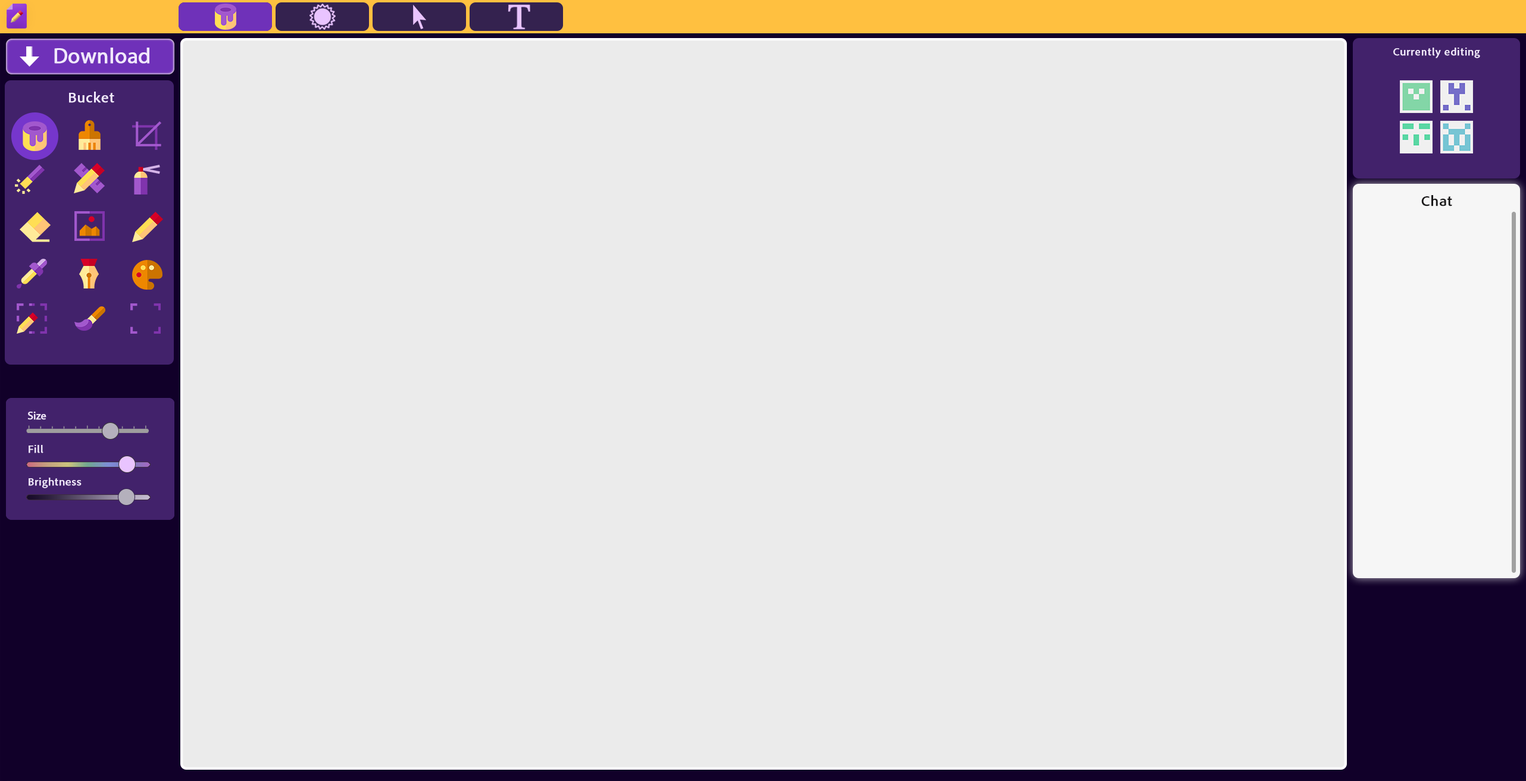
<style>
.page{position:relative;width:1526px;height:781px;background:#ebebeb}
.page>*{position:absolute;margin:0}
.t1{font:21.4px "MyriadPro-Regular";color:#f1e8fc;font-weight:bold}
.t2{font:10.7px "AdobeCleanUI-Regular";color:#f1e8fc;font-weight:bold}
.t3{font:14.3px "AdobeCleanUI-Regular";color:#f1e8fc;font-weight:bold}
.t4{font:14.3px "AdobeCleanUI-Regular";color:#191819;font-weight:bold}
.t5{font:10.7px "MyriadPro-Regular";color:#f1e8fc;font-weight:bold}
</style>
<div class="page">
<p class="t1" style="left:54px;top:48px;width:95px;height:16px">Download</p>
<p class="t2" style="left:1393px;top:48px;width:87px;height:10px">Currently editing</p>
<p class="t3" style="left:69px;top:92px;width:45px;height:11px">Bucket</p>
<p class="t4" style="left:1421px;top:195px;width:31px;height:12px">Chat</p>
<p class="t5" style="left:27px;top:412px;width:19px;height:8px">Size</p>
<p class="t5" style="left:27px;top:412px;width:19px;height:8px">Size</p>
<p class="t2" style="left:29px;top:445px;width:14px;height:9px">Fill</p>
<p class="t2" style="left:29px;top:445px;width:14px;height:9px">Fill</p>
<p class="t2" style="left:29px;top:478px;width:53px;height:11px">Brightness</p>
<p class="t2" style="left:29px;top:478px;width:53px;height:11px">Brightness</p>
</div>
